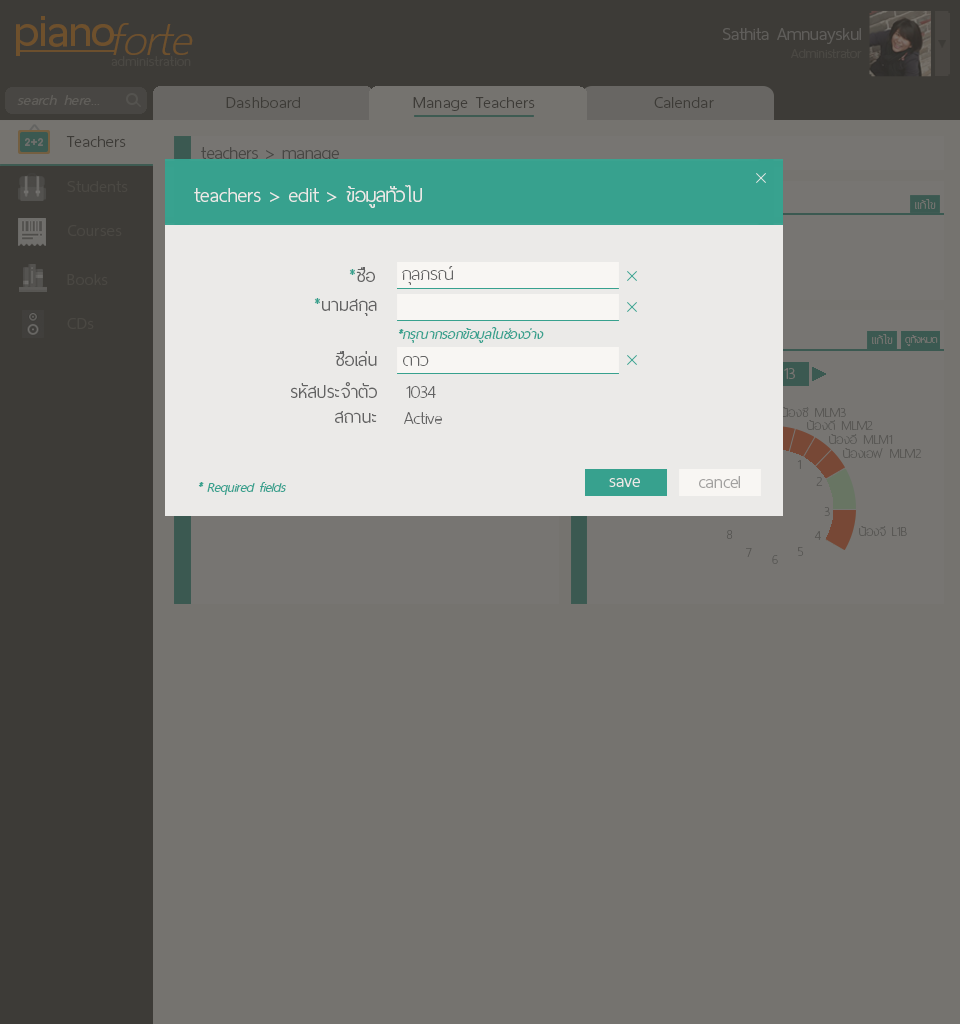
<style>
.page{position:relative;width:960px;height:1024px;background:#75736f}
.page>*{position:absolute;margin:0}
.t1{font:60px "ThaiSansNeue-SemiBold";letter-spacing:-0.005em;color:#6e502c}
.t2{font:62px "ThaiSansNeue-ExtraLightItalic";letter-spacing:-0.005em;color:#6e502c}
.t3{font:24px "ThaiSansNeue-Light";letter-spacing:-0.005em;color:#5f5d5a}
.t4{font:18px "ThaiSansNeue-Light";letter-spacing:-0.005em;color:#4a4843}
.t5{font:18.5px "ThaiSansNeue-ExtraLight";letter-spacing:0.025em;color:#4a4843}
.t6{font:20px "ThaiSansNeue-LightItalic";letter-spacing:0.025em;color:#605e5a}
.t7{font:22px "ThaiSansNeue-Light";letter-spacing:0.025em;color:#3d3b37}
.t8{font:24px "ThaiSansNeue-Light";letter-spacing:-0.005em;color:#484744}
.t9{font:22px "ThaiSansNeue-Light";letter-spacing:0.025em;color:#4a4843}
.t10{font:28px "ThaiSansNeue-Light";letter-spacing:-0.005em;color:#ebeae8}
.t11{font:26px "ThaiSansNeue-Light";letter-spacing:-0.005em;color:#ebeae8}
.t12{font:16px "ThaiSansNeue-UltraLight";color:#777572}
.t13{font:24px "ThaiSansNeue-Light";color:#636363}
.t14{font:24px "ThaiSansNeue-Light";color:#37a18e}
.t15{font:24px "ThaiSansNeue-UltraLight";color:#636363}
.t16{font:18px "ThaiSansNeue-LightItalic";color:#37a18e}
.t17{font:14px "ThaiSansNeue-UltraLight";color:#777572}
.t18{font:18px "ThaiSansNeue-UltraLight";letter-spacing:0.01em;color:#5a5855}
.t19{font:24px "ThaiSansNeue-Light";letter-spacing:-0.005em;color:#ebeae8}
.t20{font:24px "ThaiSansNeue-Light";color:#a2a1a0}
.t21{font:18px "ThaiSansNeue-UltraLight";color:#5a5855}
.t22{font:18px "ThaiSansNeue-UltraLight";letter-spacing:0.01em}
</style>
<div class="page">
<p class="t1" style="left:16px;top:16px;width:98px;height:40px">piano</p>
<p class="t2" style="left:113px;top:23px;width:80px;height:32px">forte</p>
<p class="t3" style="left:723px;top:28px;width:138px;height:16px">Sathita Amnuayskul</p>
<p class="t4" style="left:791px;top:49px;width:71px;height:9px">Administrator</p>
<p class="t5" style="left:111px;top:56px;width:80px;height:10px">administration</p>
<p class="t6" style="left:17px;top:95px;width:83px;height:10px">search here...</p>
<p class="t7" style="left:226px;top:97px;width:74px;height:11px">Dashboard</p>
<p class="t7" style="left:413px;top:97px;width:122px;height:14px">Manage Teachers</p>
<p class="t7" style="left:654px;top:97px;width:60px;height:11px">Calendar</p>
<p class="t7" style="left:66px;top:136px;width:60px;height:11px">Teachers</p>
<p class="t8" style="left:201px;top:147px;width:138px;height:16px">teachers &gt; manage</p>
<p class="t9" style="left:67px;top:181px;width:61px;height:11px">Students</p>
<p class="t10" style="left:194px;top:185px;width:228px;height:23px">teachers &gt; edit &gt; <span class="t11">ข้อมูลทั่วไป</span></p>
<p class="t12" style="left:915px;top:199px;width:21px;height:10px">แก้ไข</p>
<p class="t9" style="left:68px;top:225px;width:54px;height:11px">Courses</p>
<p class="t13" style="left:349px;top:267px;width:26px;height:15px"><span class="t14">*</span>ชื่อ</p>
<p class="t15" style="left:402px;top:266px;width:51px;height:19px">กุลภรณ์</p>
<p class="t9" style="left:67px;top:274px;width:41px;height:11px">Books</p>
<p class="t13" style="left:314px;top:298px;width:63px;height:18px"><span class="t14">*</span>นามสกุล</p>
<p class="t9" style="left:67px;top:318px;width:27px;height:11px">CDs</p>
<p class="t16" style="left:398px;top:327px;width:146px;height:16px">*กรุณากรอกข้อมูลในช่องว่าง</p>
<p class="t12" style="left:872px;top:334px;width:21px;height:10px">แก้ไข</p>
<p class="t17" style="left:905px;top:335px;width:33px;height:11px">ดูทั้งหมด</p>
<p class="t13" style="left:335px;top:351px;width:42px;height:15px">ชื่อเล่น</p>
<p class="t15" style="left:403px;top:356px;width:26px;height:10px">ดาว</p>
<p class="t13" style="left:291px;top:382px;width:86px;height:16px">รหัสประจำตัว</p>
<p class="t15" style="left:406px;top:386px;width:30px;height:12px">1034</p>
<p class="t13" style="left:335px;top:411px;width:42px;height:12px">สถานะ</p>
<p class="t15" style="left:404px;top:412px;width:38px;height:12px">Active</p>
<p class="t18" style="left:781px;top:407px;width:65px;height:10px">น้องซี MLM3</p>
<p class="t18" style="left:807px;top:420px;width:66px;height:10px">น้องดี MLM2</p>
<p class="t18" style="left:829px;top:434px;width:64px;height:10px">น้องอี MLM1</p>
<p class="t18" style="left:843px;top:448px;width:79px;height:10px">น้องเอฟ MLM2</p>
<p class="t18" style="left:797px;top:460px;width:4px;height:9px">1</p>
<p class="t16" style="left:198px;top:482px;width:88px;height:13px">* Required fields</p>
<p class="t19" style="left:609px;top:478px;width:31px;height:9px">save</p>
<p class="t20" style="left:699px;top:476px;width:41px;height:12px">cancel</p>
<p class="t18" style="left:816px;top:477px;width:7px;height:9px">2</p>
<p class="t18" style="left:824px;top:507px;width:6px;height:9px">3</p>
<p class="t18" style="left:726px;top:530px;width:7px;height:9px">8</p>
<p class="t18" style="left:814px;top:531px;width:7px;height:9px">4</p>
<p class="t21" style="left:859px;top:526px;width:48px;height:10px">น้องจี L1B</p>
<p class="t18" style="left:746px;top:548px;width:6px;height:9px">7</p>
<p class="t22" style="left:772px;top:555px;width:6px;height:9px">6</p>
<p class="t18" style="left:798px;top:547px;width:6px;height:9px">5</p>
</div>
